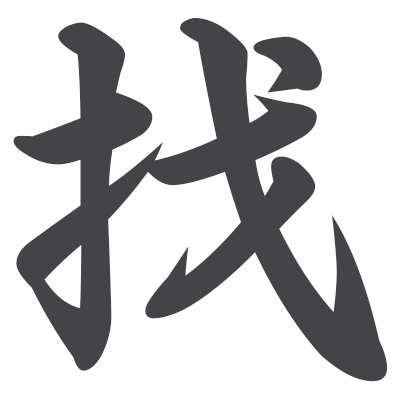
<style>
.page{position:relative;width:400px;height:400px;background:#ffffff}
.page>*{position:absolute;margin:0}
.t1{font:400px "´ºÁª±ê×¼ÐÐÊéÌå";color:#444348}
</style>
<div class="page">
<p class="t1" style="left:13px;top:17px;width:375px;height:365px">找</p>
</div>
